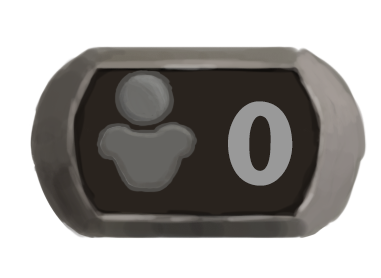
<style>
.page{position:relative;width:381px;height:278px;background:#ffffff}
.page>*{position:absolute;margin:0}
.t1{font:107.9px "FrizQuadrataBold";color:#999999}
</style>
<div class="page">
<p class="t1" style="left:228px;top:101px;width:65px;height:85px">0</p>
</div>
